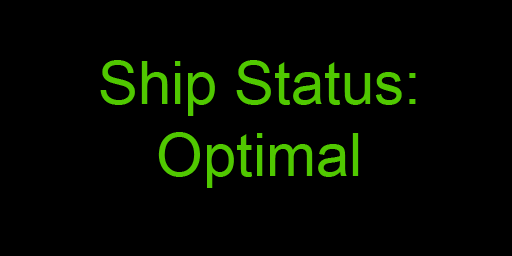
<style>
.page{position:relative;width:512px;height:256px;background:#000000}
.page>*{position:absolute;margin:0}
.t1{font:60px "ArialMT";color:#50c800}
</style>
<div class="page">
<p class="t1" style="left:100px;top:60px;width:316px;height:128px;text-align:center">Ship Status:<br>Optimal</p>
</div>
